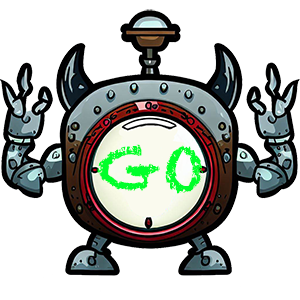
<style>
.page{position:relative;width:300px;height:300px;background:#ffffff}
.page>*{position:absolute;margin:0}
.t1{font:58.6px "Chalkduster";color:#00ff2a}
</style>
<div class="page">
<p class="t1" style="left:97px;top:144px;width:106px;height:50px">GO</p>
</div>
